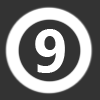
<style>
.page{position:relative;width:100px;height:100px;background:#333333}
.page>*{position:absolute;margin:0}
.t1{font:60px "SegoeUI-Bold";letter-spacing:-0.105em;color:#ffffff}
</style>
<div class="page">
<p class="t1" style="left:35px;top:29px;width:30px;height:44px">9</p>
</div>
